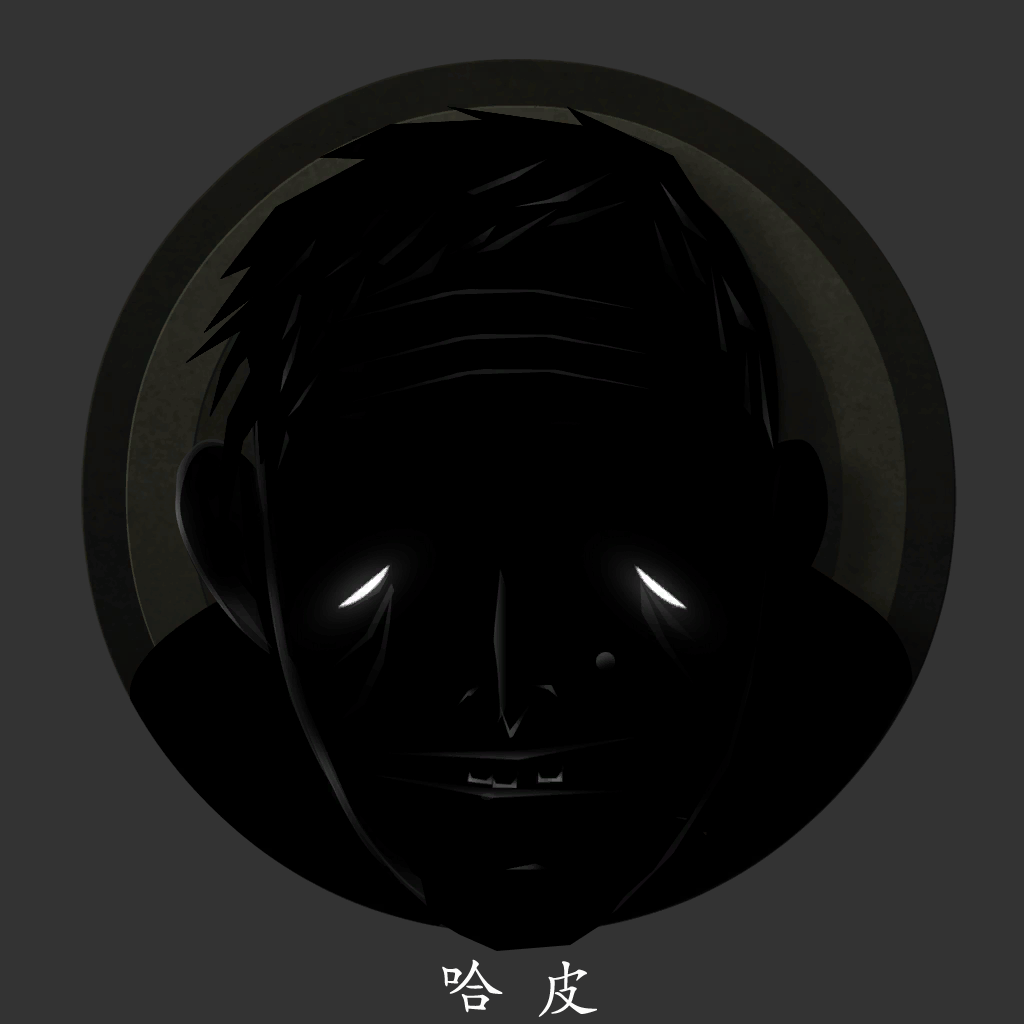
<style>
.page{position:relative;width:1024px;height:1024px;background:#333333}
.page>*{position:absolute;margin:0}
.t1{font:64px "STKaiti";letter-spacing:0.5em;color:#fdfdfc}
</style>
<div class="page">
<p class="t1" style="left:442px;top:959px;width:155px;height:58px">哈皮</p>
</div>
